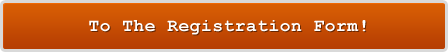
<style>
.page{position:relative;width:448px;height:52px}
.page>*{position:absolute;margin:0}
.t1{font:18px "CourierNewPS-BoldMT";letter-spacing:0.025em;color:#ffffff}
</style>
<div class="page">
<p class="t1" style="left:89px;top:20px;width:277px;height:15px">To The Registration Form!</p>
</div>
